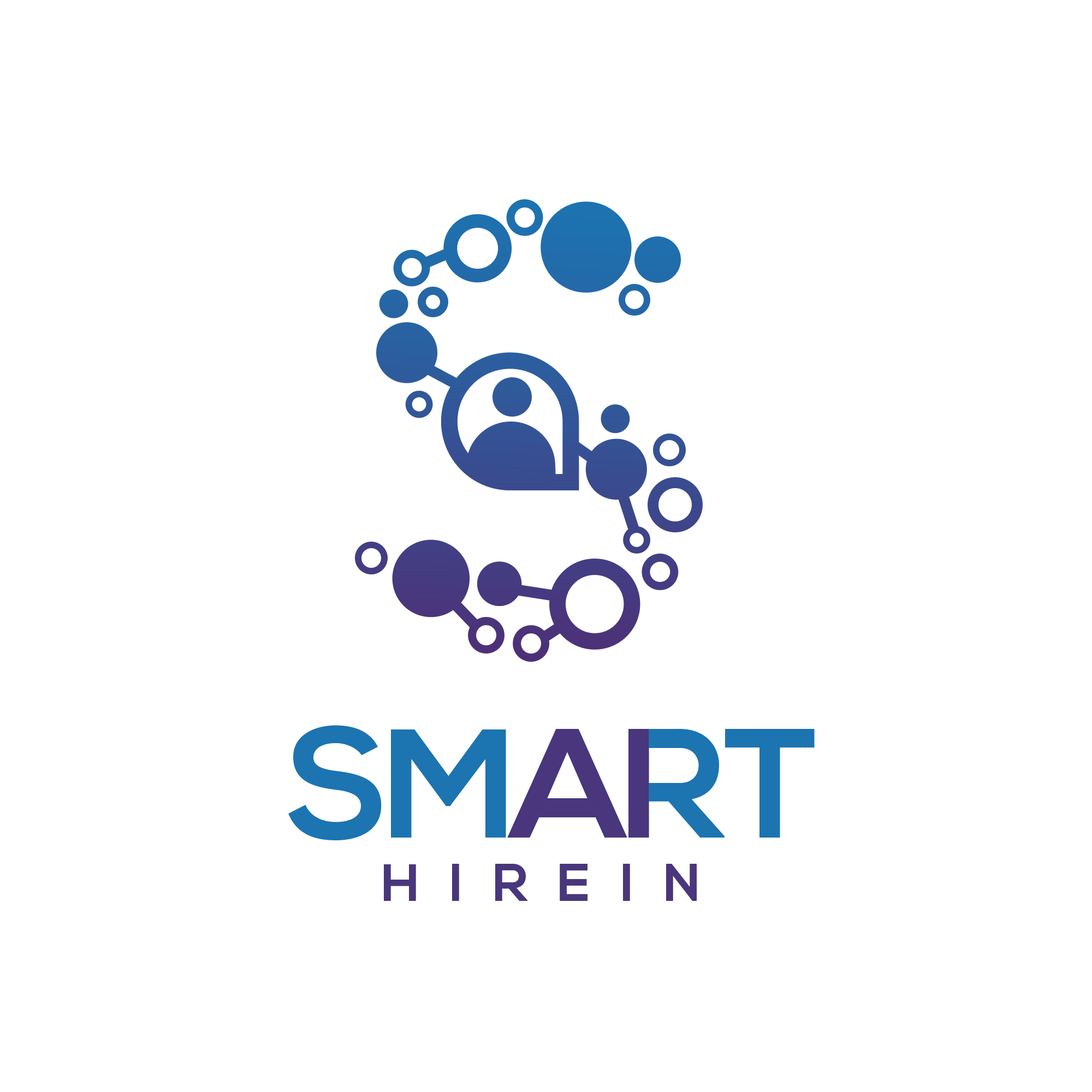
<style>
.page{position:relative;width:1092px;height:1092px;background:#ffffff}
.page>*{position:absolute;margin:0}
.t1{font:154.9px "NexaBold";letter-spacing:-0.04em;color:#1c74b1}
.t2{font:154.9px "NexaBold";letter-spacing:-0.05em;color:#1c74b1}
.t3{font:154.9px "NexaBold";letter-spacing:-0.04em;color:#49367c}
.t4{font:52.7px "NexaBold";letter-spacing:0.56em;color:#49367c}
</style>
<div class="page">
<p class="t1" style="left:288px;top:725px;width:527px;height:115px">SM<span class="t2">A</span>RT</p>
<p class="t3" style="left:507px;top:729px;width:142px;height:109px">AI</p>
<p class="t4" style="left:384px;top:864px;width:313px;height:37px">HIREIN</p>
</div>
